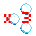
<style>
.page{position:relative;width:36px;height:36px;background:#ffffff}
.page>*{position:absolute;margin:0}
.t1{font:18px "04b03";color:#fc0101}
</style>
<div class="page">
<p class="t1" style="left:4px;top:12px;width:27px;height:11px">x 3</p>
</div>
